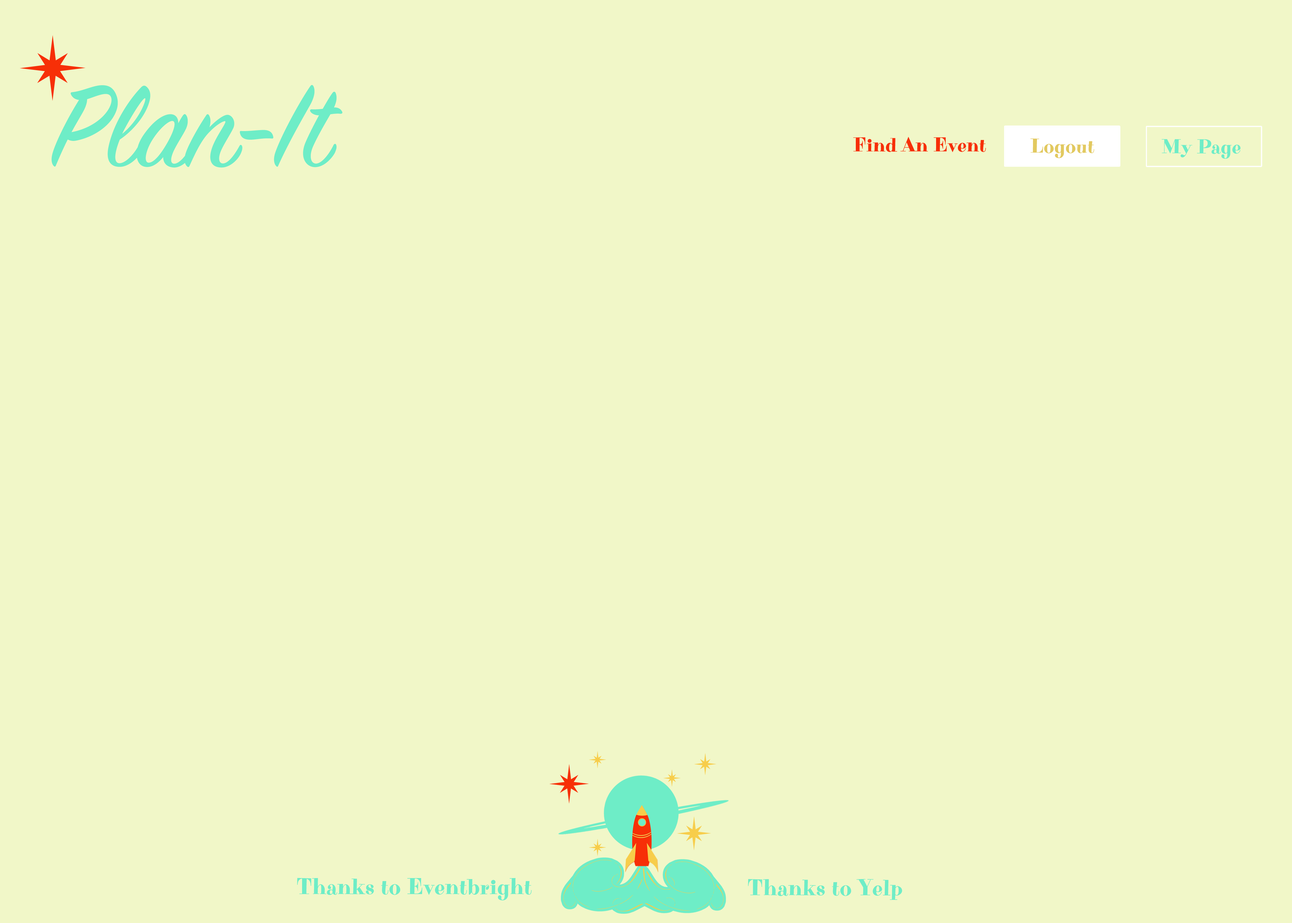
<style>
.page{position:relative;width:1292px;height:923px;background:#f1f7c8}
.page>*{position:absolute;margin:0}
.t1{font:128.2px "SignPainter-HouseScript";color:#6eedc7}
.t2{font:20.2px "PurplePurse-Regular";color:#f72f07}
.t3{font:20.2px "PurplePurse-Regular";color:#e2c960}
.t4{font:20.2px "PurplePurse-Regular";color:#6eedc7}
.t5{font:23.1px "PurplePurse-Regular";color:#6eedc7}
</style>
<div class="page">
<p class="t1" style="left:51px;top:85px;width:291px;height:83px">Plan-It</p>
<p class="t2" style="left:853px;top:137px;width:133px;height:15px">Find An Event</p>
<p class="t3" style="left:1030px;top:138px;width:64px;height:20px">Logout</p>
<p class="t4" style="left:1162px;top:139px;width:79px;height:20px">My Page</p>
<p class="t5" style="left:297px;top:878px;width:235px;height:22px">Thanks to Eventbright</p>
<p class="t5" style="left:748px;top:879px;width:154px;height:21px">Thanks to Yelp</p>
</div>
